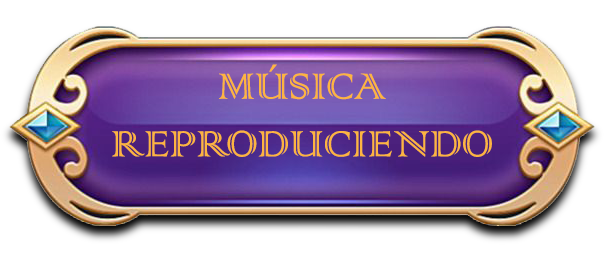
<style>
.page{position:relative;width:614px;height:264px;background:#ffffff}
.page>*{position:absolute;margin:0}
.t1{font:48px "ColonnaMT";color:#fdb441}
</style>
<div class="page">
<p class="t1" style="left:112px;top:64px;width:380px;height:93px;text-align:center">MÚSICA REPRODUCIENDO</p>
</div>
